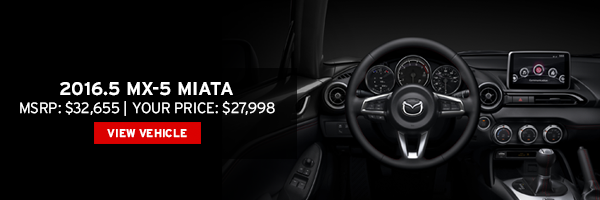
<style>
.page{position:relative;width:600px;height:200px;background:#000000}
.page>*{position:absolute;margin:0}
.t1{font:18.4px "Interstate-Bold";color:#ffffff}
.t2{font:14.8px "Interstate-Light";color:#ffffff}
.t3{font:11.2px "Interstate-Bold";color:#ffffff}
</style>
<div class="page">
<p class="t1" style="left:60px;top:82px;width:173px;height:14px">2016.5 MX-5 MIATA</p>
<p class="t2" style="left:20px;top:101px;width:255px;height:15px">MSRP: $32,655 | YOUR PRICE: $27,998</p>
<p class="t3" style="left:107px;top:129px;width:80px;height:9px">VIEW VEHICLE</p>
</div>
